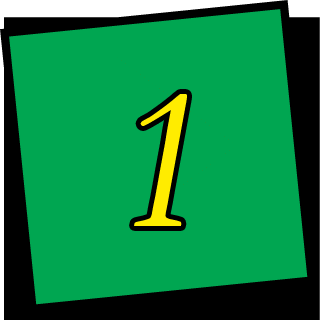
<style>
.page{position:relative;width:320px;height:320px;background:#00a651}
.page>*{position:absolute;margin:0}
.t1{font:208.3px "Garamond";color:#ffec00;font-style:italic}
</style>
<div class="page">
<p class="t1" style="left:134px;top:94px;width:53px;height:132px">1</p>
</div>
